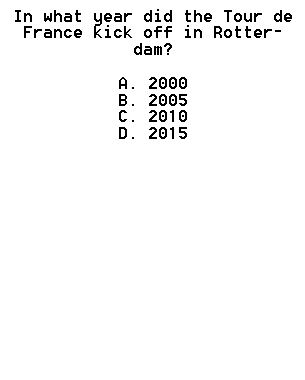
<style>
.page{position:relative;width:305px;height:380px;background:#ffffff}
.page>*{position:absolute;margin:0}
.t1{font:14px "8514oem";color:#000000}
</style>
<div class="page">
<p class="t1" style="left:15px;top:9px;width:277px;height:130px;text-align:center">In what year did the Tour de France kick off in Rotterdam? <br><br>A. 2000 <br>B. 2005<br>C. 2010 <br>D. 2015</p>
</div>
